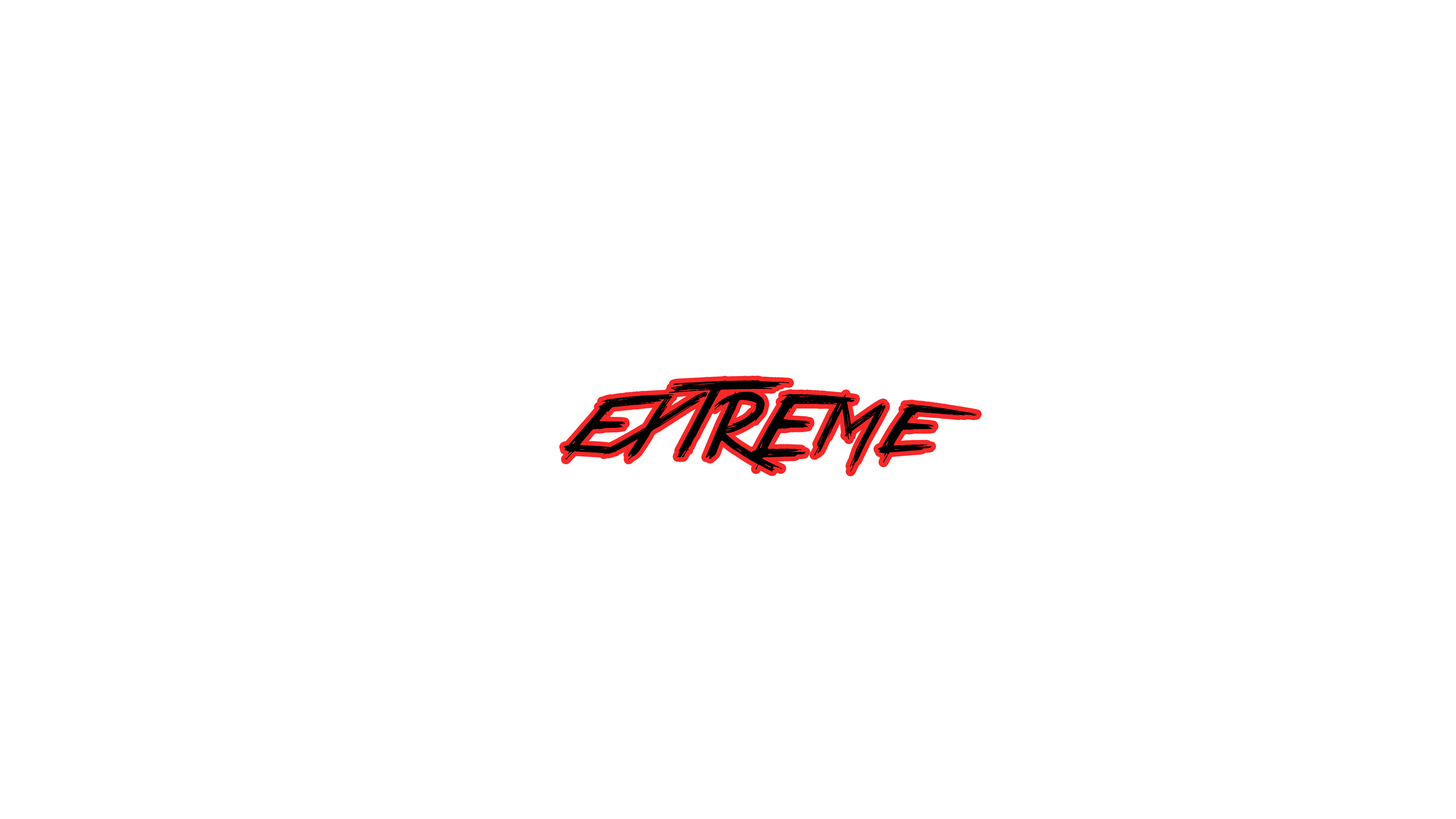
<style>
.page{position:relative;width:1456px;height:819px;background:#ffffff}
.page>*{position:absolute;margin:0}
.t1{font:56.4px "TrueLies";letter-spacing:0.06em;color:#000000;scale:1.73 1}
</style>
<div class="page">
<p class="t1" style="left:564px;top:380px;width:413px;height:92px">extreme</p>
</div>
